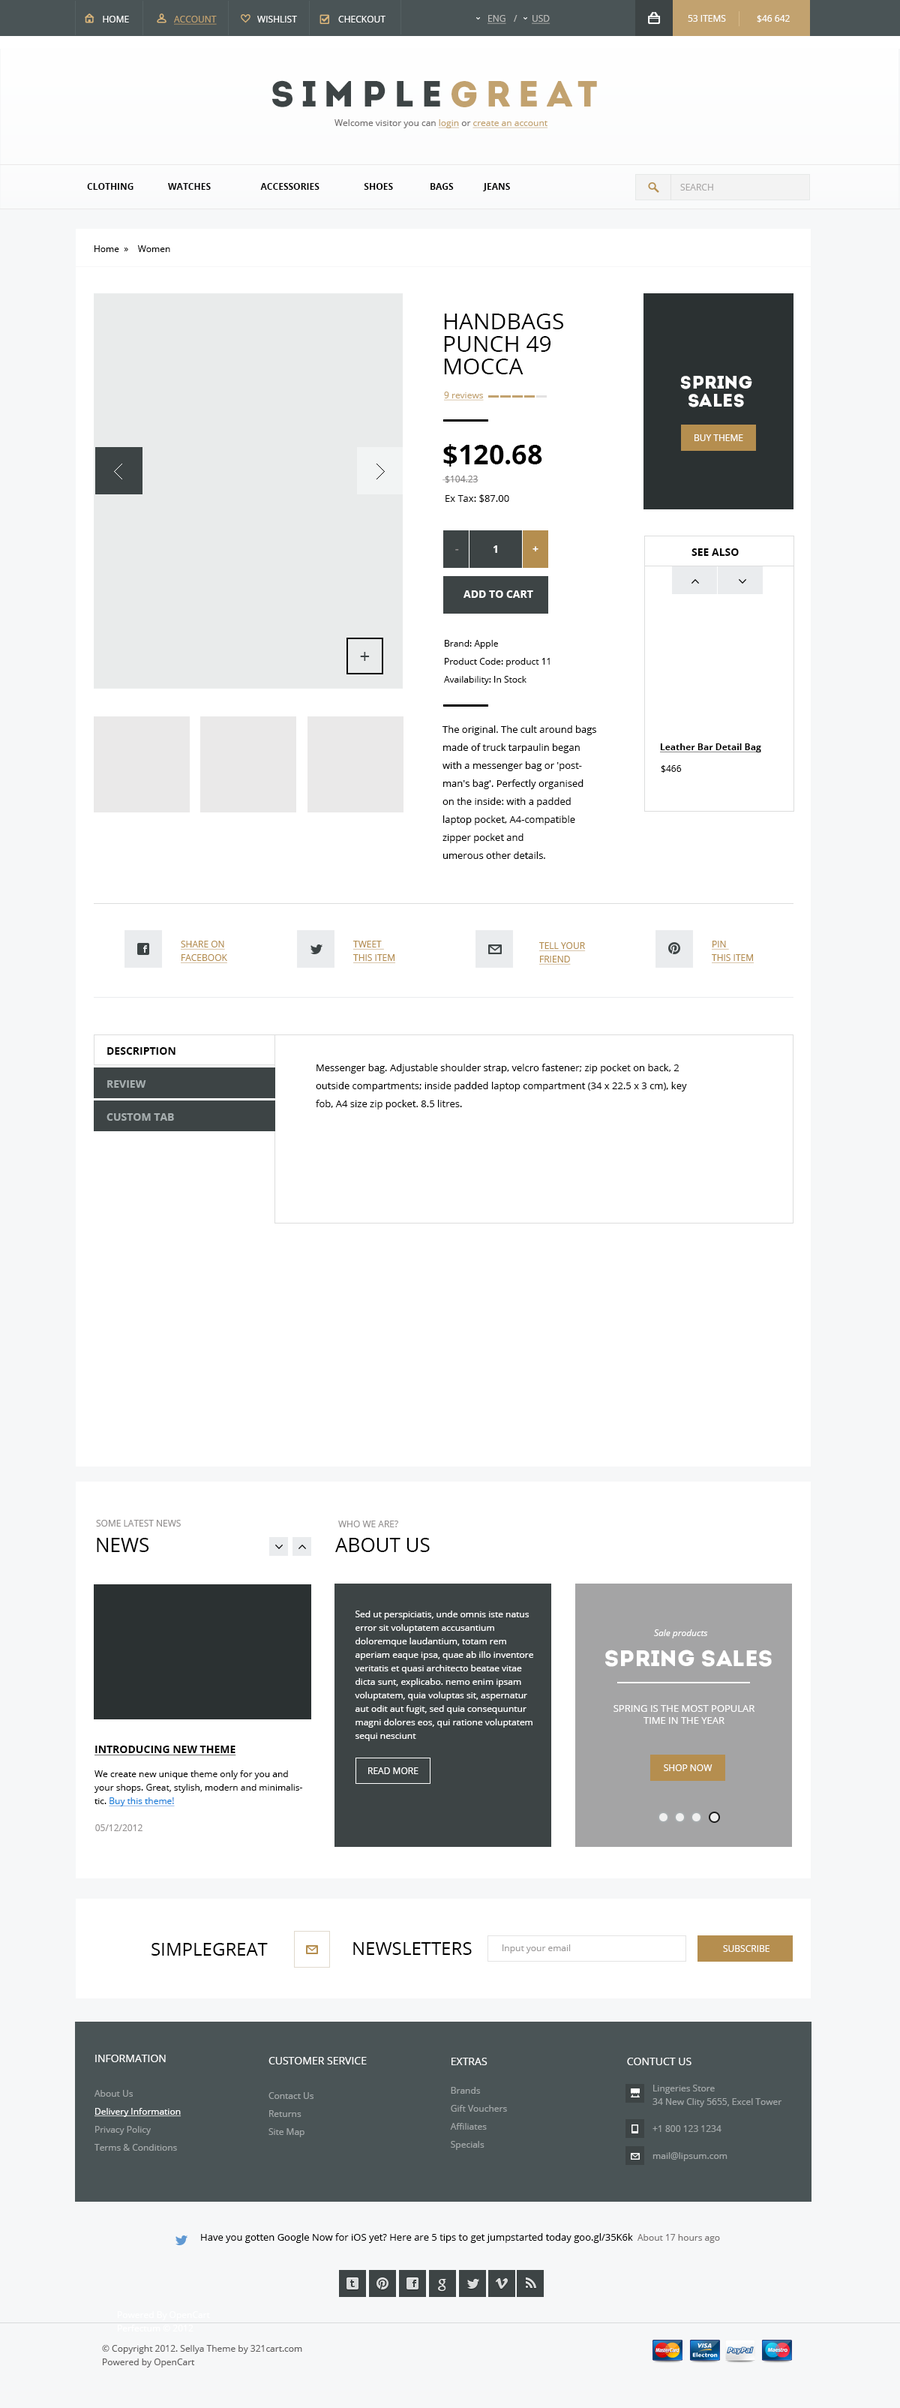
<style>
.page{position:relative;width:900px;height:2408px;background:#ffffff}
.page>*{position:absolute;margin:0}
.t1{font:9px "OpenSans";color:#ffffff;text-transform:uppercase}
.t2{font:9px "OpenSans";color:#c2a26f;text-transform:uppercase;text-decoration:underline}
.t3{font:9px "OpenSans";color:#babab8;text-transform:uppercase;text-decoration:underline}
.t4{font:9px "OpenSans";color:#babab8;text-transform:uppercase}
.t5{font:9px "OpenSans";color:#babab8;text-decoration:underline}
.t6{font:9px "OpenSans";color:#ffffff}
.t7{font:36px "Intro";letter-spacing:0.2em;color:#3d4445;text-transform:uppercase}
.t8{font:36px "Intro";letter-spacing:0.2em;color:#c2a26f;text-transform:uppercase}
.t9{font:9px "OpenSans";color:#716e6e}
.t10{font:9px "OpenSans";color:#c2a26f;text-decoration:underline}
.t11{font:9px "OpenSans-Bold";color:#000000;text-transform:uppercase}
.t12{font:9px "OpenSans";color:#aaa8a8;text-transform:uppercase}
.t13{font:9px "OpenSans";color:#000000}
.t14{font:22.5px/22.5px "OpenSans";color:#000000;text-transform:uppercase}
.t15{font:18px/18px "Intro";color:#ffffff;text-transform:uppercase}
.t16{font:27px/18px "OpenSans-Bold";color:#000000}
.t17{font:9px/18px "OpenSans";color:#838181}
.t18{font:9.8px "OpenSans";color:#000000}
.t19{font:10.5px "OpenSans-Bold";color:#ffffff}
.t20{font:10.5px "OpenSans-Bold";color:#918e8e}
.t21{font:10.5px "OpenSans-Bold";color:#000000}
.t22{font:9px/18px "OpenSans";color:#000000}
.t23{font:18px "OpenSans";color:#3d4445}
.t24{font:9.8px/18px "OpenSans";color:#000000}
.t25{font:9px "OpenSans-Bold";color:#000000;text-decoration:underline}
.t26{font:9px/13.5px "OpenSans";color:#b58e4f;text-decoration:underline}
.t27{font:10.5px "OpenSans-Bold";color:#a6aeaf}
.t28{font:9px "OpenSans";color:#928f8f;text-transform:uppercase}
.t29{font:19.5px "OpenSans";color:#000000}
.t30{font:9px/13.5px "OpenSans";color:#ffffff}
.t31{font:9px "OpenSans-Italic";color:#ffffff}
.t32{font:22.5px "Intro";color:#ffffff;text-transform:uppercase}
.t33{font:9.8px/12px "OpenSans";color:#ffffff;text-transform:uppercase}
.t34{font:9px/13.5px "OpenSans";color:#000000}
.t35{font:9px/10.5px "OpenSans";color:#928f8f;text-transform:uppercase}
.t36{font:10.5px/10.5px "OpenSans-Bold";color:#000000;text-transform:uppercase;text-decoration:underline}
.t37{font:9px/13.5px "OpenSans";color:#117dd9;text-decoration:underline}
.t38{font:9px "OpenSans";color:#000000;text-transform:uppercase}
.t39{font:18px "OpenSans";color:#000000}
.t40{font:18px "OpenSans";color:#000000;text-transform:uppercase}
.t41{font:9px "OpenSans";color:#9d9b9b}
.t42{font:9px/18px "OpenSans";color:#a3a8a9}
.t43{font:10.5px/13.5px "OpenSans";color:#ffffff;text-transform:uppercase}
.t44{font:9px/7.5px "OpenSans";color:#a3a8a9}
.t45{font:9px/18px "OpenSans";color:#ffffff;text-decoration:underline}
.t46{font:10.5px "OpenSans";color:#ffffff;text-transform:uppercase}
.t47{font:9px/13.5px "OpenSans";color:#a3a8a9}
.t48{font:9px "OpenSans";color:#767272}
.t49{font:9px/13.5px "OpenSans";color:#615f5f}
</style>
<div class="page">
<p class="t1" style="left:103px;top:16px;width:283px;height:9px">Home  <span class="t2">Account</span>       Wishlist       Checkout</p>
<p class="t3" style="left:488px;top:15px;width:18px;height:9px">Eng</p>
<p class="t4" style="left:514px;top:15px;width:4px;height:7px">/</p>
<p class="t5" style="left:532px;top:15px;width:18px;height:9px">USD</p>
<p class="t1" style="left:688px;top:15px;width:38px;height:7px">53 items</p>
<p class="t6" style="left:757px;top:15px;width:33px;height:7px">$46 642</p>
<p class="t7" style="left:272px;top:80px;width:325px;height:27px">simple<span class="t8">great</span></p>
<p class="t9" style="left:334px;top:119px;width:214px;height:9px">Welcome visitor you can <span class="t10">login</span> or <span class="t10">create an account</span></p>
<p class="t11" style="left:87px;top:183px;width:423px;height:8px">Clothing  Watches         Accessories     Shoes         Bags         Jeans</p>
<p class="t12" style="left:680px;top:184px;width:33px;height:6px">Search</p>
<p class="t13" style="left:94px;top:245px;width:76px;height:7px">Home  »    Women</p>
<p class="t14" style="left:444px;top:314px;width:119px;height:60px">handbags<br>Punch 49 mocca</p>
<p class="t15" style="left:680px;top:376px;width:72px;height:31px;text-align:center">spring <br>sales</p>
<p class="t10" style="left:444px;top:392px;width:40px;height:8px">9 reviews</p>
<p class="t1" style="left:694px;top:434px;width:49px;height:7px">buy theme</p>
<p class="t16" style="left:442px;top:444px;width:100px;height:39px">$120.68<br><span class="t17"> $104.23</span></p>
<p class="t18" style="left:446px;top:494px;width:63px;height:8px">Ex Tax: $87.00</p>
<p class="t19" style="left:494px;top:545px;width:3px;height:8px">1</p>
<p class="t20" style="left:455px;top:549px;width:4px;height:1px">-</p>
<p class="t19" style="left:532px;top:546px;width:6px;height:5px">+</p>
<p class="t21" style="left:692px;top:548px;width:47px;height:8px">SEE ALSO</p>
<p class="t19" style="left:464px;top:590px;width:69px;height:8px">ADD TO CART</p>
<p class="t22" style="left:444px;top:640px;width:106px;height:45px">Brand: Apple<br>Product Code: product 11<br>Availability: In Stock</p>
<p class="t23" style="left:360px;top:652px;width:10px;height:9px">+</p>
<p class="t24" style="left:442px;top:725px;width:154px;height:134px">The original. The cult around bags made of truck tarpaulin began with a messenger bag or 'postman's bag'. Perfectly organised on the inside: with a padded laptop pocket, A4-compatible zipper pocket and <br>umerous other details.</p>
<p class="t25" style="left:660px;top:743px;width:101px;height:9px">Leather Bar Detail Bag</p>
<p class="t13" style="left:661px;top:765px;width:21px;height:7px">$466</p>
<p class="t26" style="left:181px;top:940px;width:46px;height:23px">SHARE ON<br>FACEBOOK</p>
<p class="t26" style="left:353px;top:940px;width:43px;height:23px">TWEET <br>THIS ITEM</p>
<p class="t26" style="left:539px;top:942px;width:47px;height:22px">TELL YOUR<br>FRIEND</p>
<p class="t26" style="left:712px;top:940px;width:42px;height:23px">PIN <br>THIS ITEM</p>
<p class="t21" style="left:107px;top:1047px;width:69px;height:7px">DESCRIPTION</p>
<p class="t24" style="left:316px;top:1064px;width:371px;height:45px">Messenger bag. Adjustable shoulder strap, velcro fastener; zip pocket on back, 2 outside compartments; inside padded laptop compartment (34 x 22.5 x 3 cm), key fob, A4 size zip pocket. 8.5 litres.</p>
<p class="t27" style="left:107px;top:1080px;width:39px;height:8px">REVIEW</p>
<p class="t27" style="left:106px;top:1113px;width:68px;height:7px">CUSTOM TAB</p>
<p class="t28" style="left:96px;top:1520px;width:85px;height:6px">Some latest news</p>
<p class="t28" style="left:338px;top:1520px;width:60px;height:7px">who we are?</p>
<p class="t29" style="left:97px;top:1538px;width:52px;height:14px">NEWS</p>
<p class="t29" style="left:335px;top:1538px;width:95px;height:14px">ABOUT US</p>
<p class="t30" style="left:355px;top:1610px;width:178px;height:131px">Sed ut perspiciatis, unde omnis iste natus error sit voluptatem accusantium doloremque laudantium, totam rem aperiam eaque ipsa, quae ab illo inventore veritatis et quasi architecto beatae vitae dicta sunt, explicabo. nemo enim ipsam voluptatem, quia voluptas sit, aspernatur aut odit aut fugit, sed quia consequuntur magni dolores eos, qui ratione voluptatem sequi nesciunt</p>
<p class="t31" style="left:654px;top:1629px;width:54px;height:9px">Sale products</p>
<p class="t32" style="left:605px;top:1649px;width:167px;height:17px">spring sales</p>
<p class="t33" style="left:614px;top:1705px;width:141px;height:19px;text-align:center">Spring is the most popular time in the year</p>
<p class="t34" style="left:94px;top:1745px;width:208px;height:61px"><span class="t35"><br><br></span><span class="t36">introducing new theme<br><br></span>We create new unique theme only for you and your shops. Great, stylish, modern and minimalistic. <span class="t37">Buy this theme!</span></p>
<p class="t1" style="left:368px;top:1767px;width:50px;height:7px">read more</p>
<p class="t1" style="left:664px;top:1764px;width:48px;height:7px">SHOP NOW</p>
<p class="t28" style="left:95px;top:1824px;width:47px;height:7px"><span class="t38">      </span>05/12/2012</p>
<p class="t39" style="left:152px;top:1942px;width:116px;height:13px">SIMPLEGREAT</p>
<p class="t40" style="left:353px;top:1942px;width:119px;height:12px">newsletters</p>
<p class="t41" style="left:502px;top:1944px;width:69px;height:9px">Input your email</p>
<p class="t1" style="left:723px;top:1945px;width:47px;height:7px">SUBSCRIBE</p>
<p class="t42" style="left:94px;top:2054px;width:88px;height:96px"><span class="t43">Information<br><br><br></span><span class="t44">About Us<br></span><span class="t45">Delivery Information<br></span>Privacy Policy<br>Terms &amp; Conditions</p>
<p class="t43" style="left:268px;top:2056px;width:99px;height:81px">Customer Service<br><br><br><span class="t44">Contact Us<br></span><span class="t42">Returns<br>Site Map</span></p>
<p class="t42" style="left:450px;top:2057px;width:57px;height:93px"><span class="t43">Extras<br><br><br></span><span class="t44">Brands<br></span>Gift Vouchers<br>Affiliates<br>Specials</p>
<p class="t46" style="left:627px;top:2057px;width:65px;height:8px">contuct us</p>
<p class="t47" style="left:652px;top:2084px;width:130px;height:77px">Lingeries Store<br>34 New Clity 5655, Excel Tower<br><br>+1 800 123 1234<br><br>mail@lipsum.com</p>
<p class="t18" style="left:201px;top:2233px;width:519px;height:9px">Have you gotten Google Now for iOS yet? Here are 5 tips to get jumpstarted today goo.gl/35K6k <span class="t48"> About 17 hours ago</span></p>
<p class="t30" style="left:118px;top:2311px;width:92px;height:20px">Powered By OpenCart <br>Perfectum © 2012</p>
<p class="t49" style="left:102px;top:2344px;width:200px;height:23px">© Copyright 2012. Sellya Theme by 321cart.com<br>Powered by OpenCart</p>
</div>
